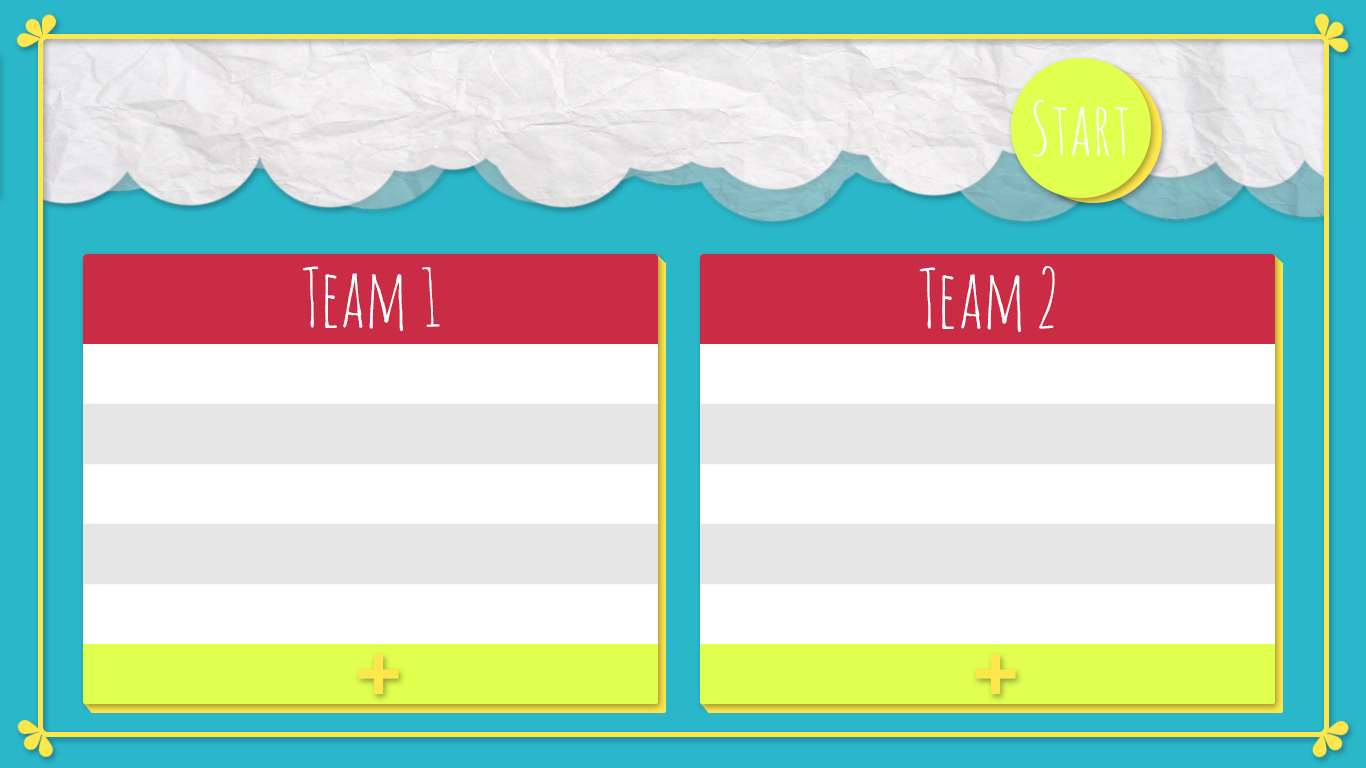
<style>
.page{position:relative;width:1366px;height:768px;background:#2ab7ca}
.page>*{position:absolute;margin:0}
.t1{font:80px "AmaticSC-Regular";color:#ffffff}
</style>
<div class="page">
<p class="t1" style="left:302px;top:266px;width:138px;height:66px">Team 1</p>
<p class="t1" style="left:919px;top:266px;width:136px;height:67px">Team 2</p>
</div>
